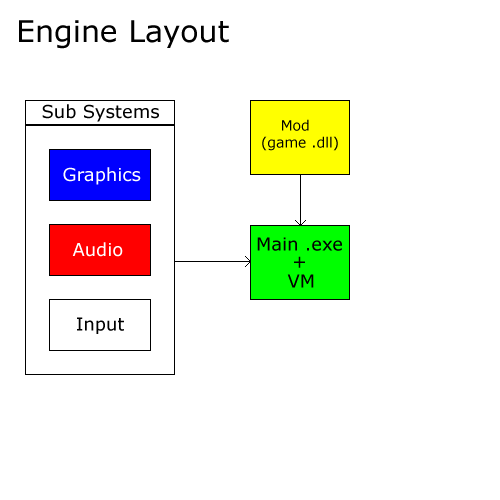
<style>
.page{position:relative;width:500px;height:500px;background:#ffffff}
.page>*{position:absolute;margin:0}
.t1{font:30px "Verdana";color:#000000}
.t2{font:18px "Verdana";color:#000000}
.t3{font:14px "Verdana";color:#000000}
.t4{font:18px "Verdana";color:#ffffff}
</style>
<div class="page">
<p class="t1" style="left:19px;top:20px;width:210px;height:29px">Engine Layout</p>
<p class="t2" style="left:42px;top:104px;width:117px;height:18px">Sub Systems</p>
<p class="t3" style="left:262px;top:119px;width:76px;height:32px">Mod <br>(game .dll)</p>
<p class="t4" style="left:63px;top:167px;width:78px;height:18px">Graphics</p>
<p class="t4" style="left:72px;top:242px;width:51px;height:15px">Audio</p>
<p class="t2" style="left:257px;top:237px;width:85px;height:14px">Main .exe</p>
<p class="t2" style="left:294px;top:256px;width:11px;height:12px">+</p>
<p class="t2" style="left:287px;top:274px;width:27px;height:14px">VM</p>
<p class="t2" style="left:77px;top:317px;width:47px;height:17px">Input</p>
</div>
